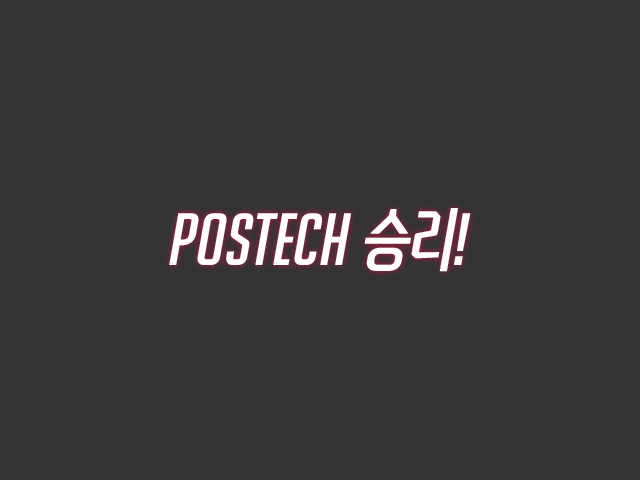
<style>
.page{position:relative;width:640px;height:480px;background:#333333}
.page>*{position:absolute;margin:0}
.t1{font:72px "Koverwatch";color:#ffffff;font-style:italic}
</style>
<div class="page">
<p class="t1" style="left:169px;top:208px;width:302px;height:64px">POSTECH 승리!</p>
</div>
